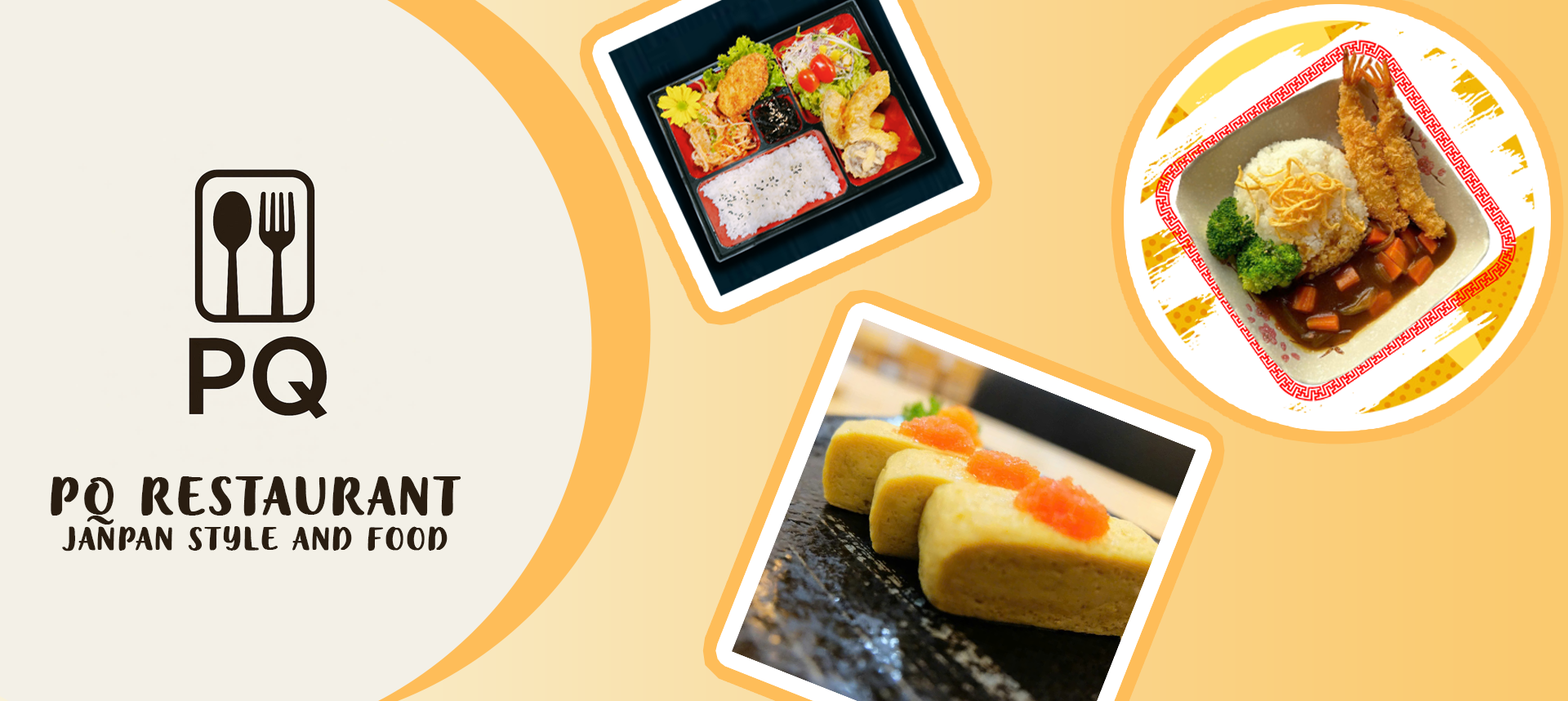
<style>
.page{position:relative;width:1568px;height:701px;background:#f3f0e7}
.page>*{position:absolute;margin:0}
.t1{font:29.4px "#9Slide07SVNDessertMenuScrip";color:#291d11;text-transform:uppercase;font-weight:bold}
.t2{font:49px "#9Slide07SVNDessertMenuScrip";color:#291d11;text-transform:uppercase;font-weight:bold}
</style>
<div class="page">
<p class="t1" style="left:51px;top:476px;width:410px;height:75px;text-align:center"><span class="t2">pq restaurant<br></span>JANPAN style and food</p>
</div>
